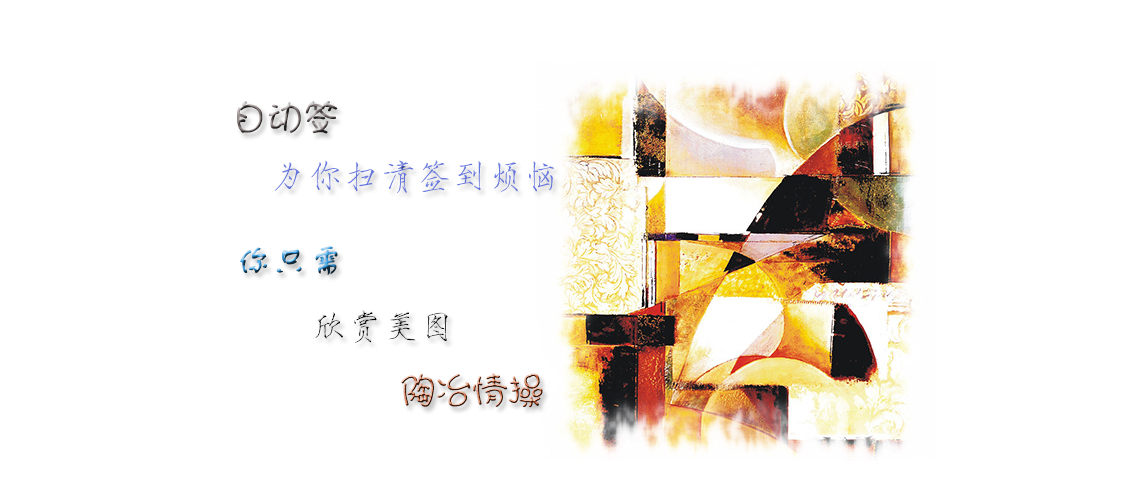
<style>
.page{position:relative;width:1140px;height:500px;background:#ffffff}
.page>*{position:absolute;margin:0}
.t1{font:36px "HYj2gj"}
.t2{font:36px "HYi3gj";color:#6677e0}
.t3{font:36px "FZSTK--GBK1-0"}
.t4{font:36px "HYi3gj"}
</style>
<div class="page">
<p class="t1" style="left:237px;top:101px;width:101px;height:33px">自动签</p>
<p class="t2" style="left:274px;top:160px;width:280px;height:33px">为你扫清签到烦恼</p>
<p class="t3" style="left:240px;top:246px;width:98px;height:29px">你只需</p>
<p class="t4" style="left:315px;top:310px;width:133px;height:33px">欣赏美图</p>
<p class="t1" style="left:401px;top:373px;width:142px;height:35px">陶冶情操</p>
</div>
